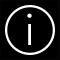
<style>
.page{position:relative;width:60px;height:60px;background:#000000}
.page>*{position:absolute;margin:0}
.t1{font:45.3px "Avenir-Light";color:#ffffff}
</style>
<div class="page">
<p class="t1" style="left:27px;top:13px;width:5px;height:32px">i</p>
</div>
